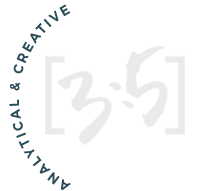
<style>
.page{position:relative;width:215px;height:191px;background:#ffffff}
.page>*{position:absolute;margin:0}
.t1{font:13.4px/5.8px "Montserrat-Medium";letter-spacing:0.2em;color:#2b4d59;text-transform:uppercase;scale:0.96 1}
</style>
<div class="page">
<p class="t1" style="left:9px;top:4px;width:62px;height:186px;text-align:center">ANALYTICAL &amp; CREATIVE</p>
</div>
